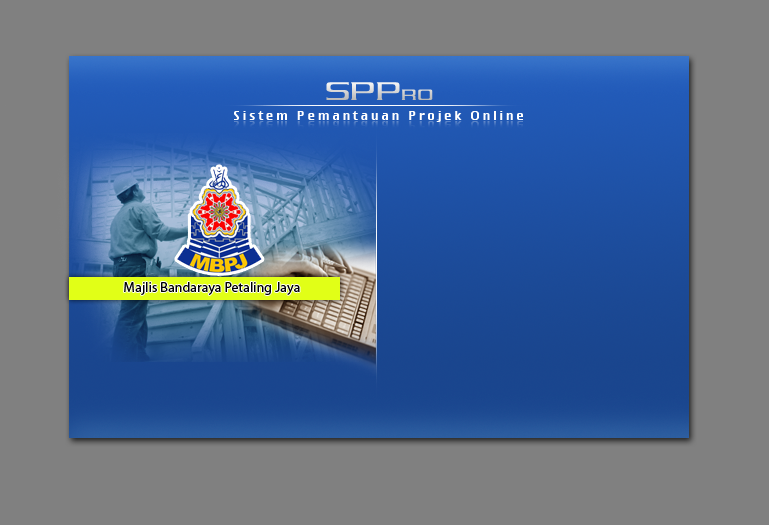
<style>
.page{position:relative;width:769px;height:525px;background:#808080}
.page>*{position:absolute;margin:0}
.t1{font:30px "Vibrocentric"}
.t2{font:18px "Vibrocentric"}
.t3{font:12px "Virtue";letter-spacing:0.2em;color:#ffffff}
.t4{font:14px "MyriadPro-Regular";color:#000000}
</style>
<div class="page">
<p class="t1" style="left:326px;top:82px;width:107px;height:18px">SPP<span class="t2">RO</span></p>
<p class="t3" style="left:234px;top:111px;width:289px;height:11px">Sistem Pemantauan Projek Online</p>
<p class="t4" style="left:124px;top:282px;width:176px;height:13px">Majlis Bandaraya Petaling Jaya</p>
</div>
